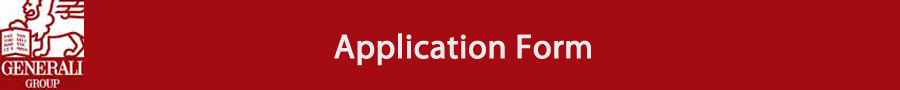
<style>
.page{position:relative;width:900px;height:90px;background:#a40b12}
.page>*{position:absolute;margin:0}
.t1{font:33.9px "MyriadPro-Regular";color:#e9e9e9;font-weight:bold}
</style>
<div class="page">
<p class="t1" style="left:334px;top:33px;width:257px;height:33px">Application Form</p>
</div>
